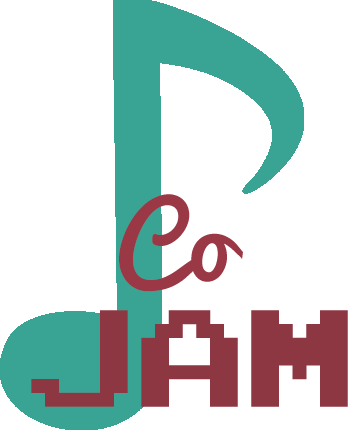
<style>
.page{position:relative;width:348px;height:430px;background:#ffffff}
.page>*{position:absolute;margin:0}
.t1{font:100px "Pacifico";color:#9b3846}
.t2{font:110px "PressStart2P-Regular";color:#8d3743}
</style>
<div class="page">
<p class="t1" style="left:119px;top:194px;width:124px;height:98px">Co</p>
<p class="t2" style="left:31px;top:310px;width:317px;height:97px">JAM</p>
</div>
